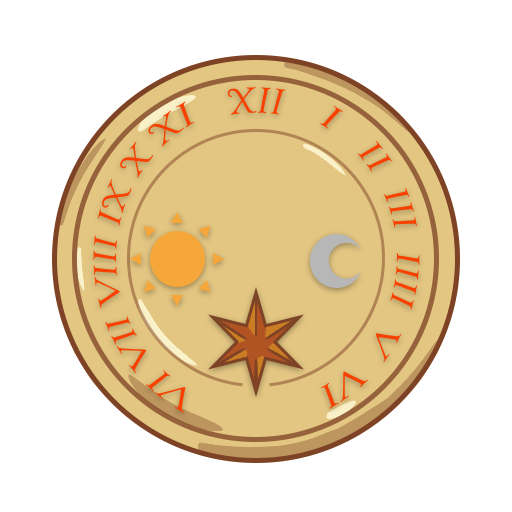
<style>
.page{position:relative;width:512px;height:512px;background:#ffffff}
.page>*{position:absolute;margin:0}
.t1{font:37.5px "GoudyOldStyleT-Italic";color:#f84100}
.t2{font:33.3px "GoudyOldStyleT-Italic";color:#f84100}
</style>
<div class="page">
<p class="t1" style="left:227px;top:87px;width:59px;height:28px">XII</p>
<p class="t2" style="left:93px;top:101px;width:102px;height:313px;rotate:-90deg">VI VII VIII IX X XI</p>
<p class="t2" style="left:320px;top:105px;width:100px;height:304px;rotate:90deg">I   II  III  IIII  V  VI</p>
</div>
